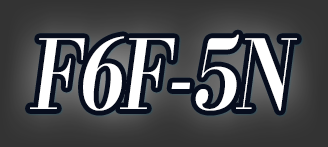
<style>
.page{position:relative;width:328px;height:147px}
.page>*{position:absolute;margin:0}
.t1{font:96px "KochoStd-Heavy";color:#ffffff;font-style:italic;scale:0.75 1}
</style>
<div class="page">
<p class="t1" style="left:30px;top:34px;width:267px;height:77px">F6F-5N</p>
</div>
